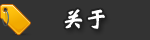
<style>
.page{position:relative;width:150px;height:40px;background:#333333}
.page>*{position:absolute;margin:0}
.t1{font:24px "STXinwei";letter-spacing:-0.05em;color:#ffffff;font-weight:bold}
</style>
<div class="page">
<p class="t1" style="left:64px;top:9px;width:41px;height:20px">关于</p>
</div>
